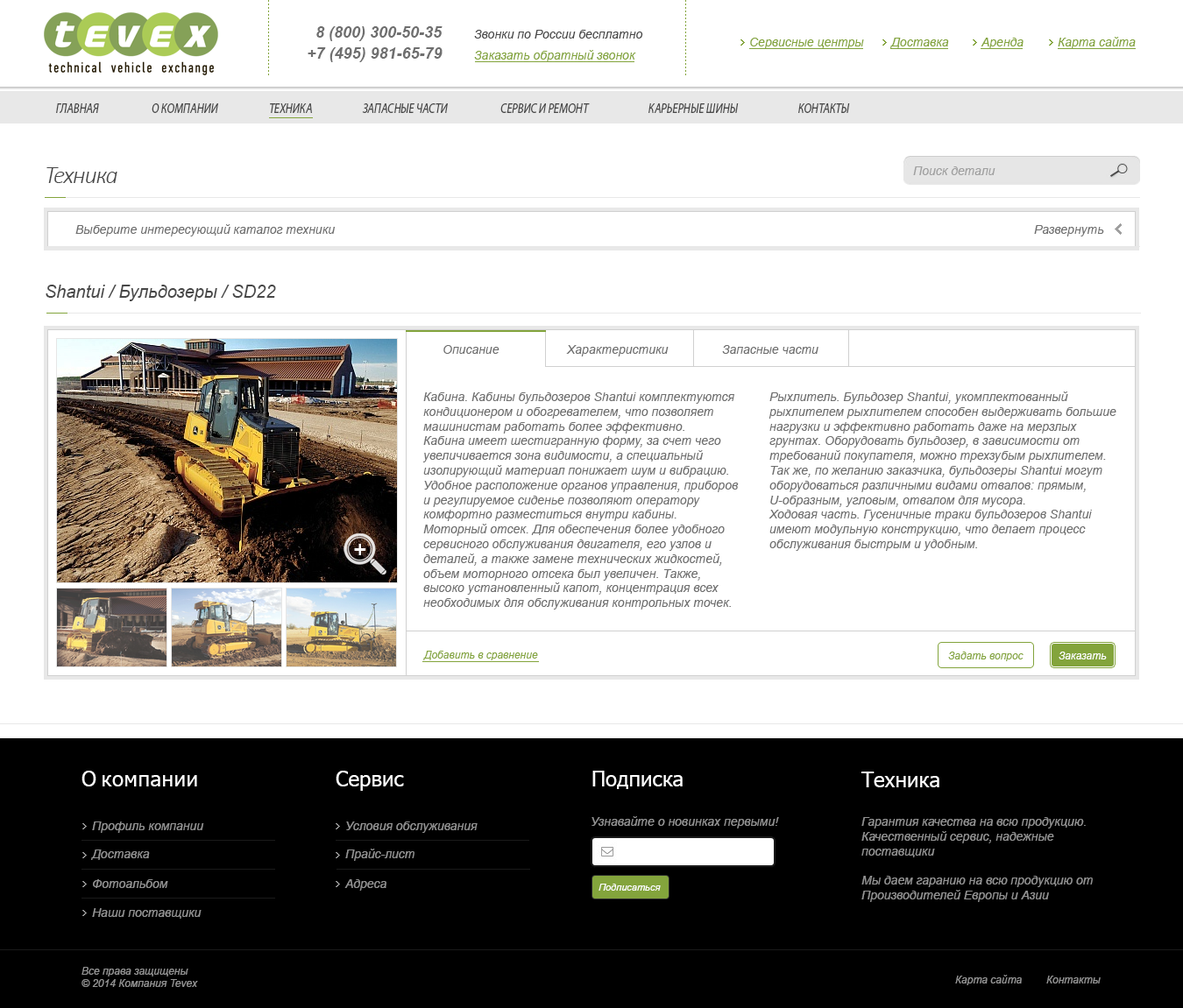
<style>
.page{position:relative;width:1183px;height:1008px;background:#ffffff}
.page>*{position:absolute;margin:0}
.t1{font:15.8px "Arial-BoldItalicMT";color:#6f6f6f}
.t2{font:12.3px "Arial-ItalicMT";color:#484848}
.t3{font:12.3px "Arial-ItalicMT";color:#83a43c}
.t4{font:14.3px "MyriadPro-It";color:#484848;scale:0.79 1}
.t5{font:24.5px "Calibri-LightItalic";letter-spacing:-0.04em;color:#484848}
.t6{font:12.3px "Arial-ItalicMT";color:#a0a0a0}
.t7{font:12.3px "Arial-ItalicMT";color:#6f6f6f}
.t8{font:17.5px "Arial-ItalicMT";color:#484848}
.t9{font:10.5px "Arial-ItalicMT";color:#83a43c}
.t10{font:10.5px "Arial-ItalicMT";color:#ffffff}
.t11{font:21px "Tahoma";letter-spacing:0.02em;color:#ffffff}
.t12{font:21px "Tahoma";color:#ffffff}
.t13{font:12.3px "Arial-ItalicMT";color:#939393}
.t14{font:9.6px "Arial-ItalicMT";color:#ffffff}
.t15{font:10.5px "Arial-ItalicMT";color:#939393}
</style>
<div class="page">
<p class="t1" style="left:316px;top:26px;width:126px;height:15px">8 (800) 300-50-35</p>
<p class="t2" style="left:474px;top:30px;width:169px;height:9px">Звонки по России бесплатно</p>
<p class="t3" style="left:750px;top:38px;width:114px;height:11px">Сервисные центры</p>
<p class="t3" style="left:890px;top:38px;width:59px;height:10px">Доставка</p>
<p class="t3" style="left:980px;top:38px;width:43px;height:11px">Аренда</p>
<p class="t3" style="left:1057px;top:37px;width:78px;height:12px">Карта сайта</p>
<p class="t1" style="left:307px;top:47px;width:135px;height:15px">+7 (495) 981-65-79</p>
<p class="t3" style="left:474px;top:50px;width:162px;height:12px">Заказать обратный звонок</p>
<p class="t4" style="left:56px;top:103px;width:43px;height:10px">ГЛАВНАЯ</p>
<p class="t4" style="left:152px;top:103px;width:66px;height:10px">О КОМПАНИИ</p>
<p class="t4" style="left:270px;top:103px;width:42px;height:10px">ТЕХНИКА</p>
<p class="t4" style="left:362px;top:103px;width:86px;height:10px">ЗАПАСНЫЕ ЧАСТИ</p>
<p class="t4" style="left:500px;top:103px;width:90px;height:10px">СЕРВИС И РЕМОНТ</p>
<p class="t4" style="left:648px;top:103px;width:90px;height:10px">КАРЬЕРНЫЕ ШИНЫ</p>
<p class="t4" style="left:798px;top:103px;width:52px;height:10px">КОНТАКТЫ</p>
<p class="t5" style="left:46px;top:167px;width:71px;height:16px">Техника</p>
<p class="t6" style="left:913px;top:166px;width:82px;height:9px">Поиск детали</p>
<p class="t7" style="left:75px;top:224px;width:261px;height:13px">Выберите интересующий каталог техники</p>
<p class="t7" style="left:1034px;top:225px;width:70px;height:12px">Развернуть</p>
<p class="t8" style="left:46px;top:285px;width:230px;height:16px">Shantui / Бульдозеры / SD22</p>
<p class="t7" style="left:443px;top:345px;width:56px;height:9px">Описание</p>
<p class="t7" style="left:566px;top:345px;width:102px;height:12px">Характеристики</p>
<p class="t7" style="left:722px;top:345px;width:96px;height:9px">Запасные части</p>
<p class="t7" style="left:422px;top:392px;width:316px;height:218px">Кабина. Кабины бульдозеров Shantui комплектуются <br>кондиционером и обогревателем, что позволяет <br>машинистам работать более эффективно. <br>Кабина имеет шестигранную форму, за счет чего <br>увеличивается зона видимости, а специальный <br>изолирующий материал понижает шум и вибрацию. <br>Удобное расположение органов управления, приборов <br>и регулируемое сиденье позволяют оператору <br>комфортно разместиться внутри кабины.<br>Моторный отсек. Для обеспечения более удобного <br>сервисного обслуживания двигателя, его узлов и <br>деталей, а также замене технических жидкостей, <br>объем моторного отсека был увеличен. Также, <br>высоко установленный капот, концентрация всех <br>необходимых для обслуживания контрольных точек.</p>
<p class="t7" style="left:768px;top:392px;width:348px;height:159px">Рыхлитель. Бульдозер Shantui, укомплектованный <br>рыхлителем рыхлителем способен выдерживать большие <br>нагрузки и эффективно работать даже на мерзлых <br>грунтах. Оборудовать бульдозер, в зависимости от <br>требований покупателя, можно трехзубым рыхлителем. <br>Так же, по желанию заказчика, бульдозеры Shantui могут <br>оборудоваться различными видами отвалов: прямым, <br>U-образным, угловым, отвалом для мусора.<br>Ходовая часть. Гусеничные траки бульдозеров Shantui <br>имеют модульную конструкцию, что делает процесс <br>обслуживания быстрым и удобным.</p>
<p class="t9" style="left:423px;top:651px;width:115px;height:10px">Добавить в сравнение</p>
<p class="t9" style="left:948px;top:652px;width:75px;height:9px">Задать вопрос</p>
<p class="t10" style="left:1058px;top:652px;width:48px;height:8px">Заказать</p>
<p class="t11" style="left:81px;top:771px;width:116px;height:16px"><span class="t12">О </span>компании</p>
<p class="t12" style="left:336px;top:771px;width:68px;height:20px">Сервис</p>
<p class="t12" style="left:592px;top:771px;width:90px;height:18px">Подписка</p>
<p class="t12" style="left:861px;top:772px;width:78px;height:16px">Техника</p>
<p class="t13" style="left:92px;top:822px;width:112px;height:11px">Профиль компании</p>
<p class="t13" style="left:346px;top:822px;width:131px;height:11px">Условия обслуживания</p>
<p class="t13" style="left:591px;top:816px;width:188px;height:13px">Узнавайте о новинках первыми!</p>
<p class="t13" style="left:861px;top:817px;width:231px;height:85px">Гарантия качества на всю продукцию.<br>Качественный сервис, надежные <br>поставщики<br><br>Мы даем гаранию на всю продукцию от <br>Производителей Европы и Азии</p>
<p class="t13" style="left:91px;top:850px;width:59px;height:10px">Доставка</p>
<p class="t13" style="left:345px;top:849px;width:69px;height:12px">Прайс-лист</p>
<p class="t13" style="left:93px;top:880px;width:75px;height:8px">Фотоальбом</p>
<p class="t13" style="left:344px;top:880px;width:42px;height:11px">Адреса</p>
<p class="t14" style="left:598px;top:884px;width:63px;height:7px">Подписаться</p>
<p class="t13" style="left:92px;top:908px;width:109px;height:11px">Наши поставщики</p>
<p class="t15" style="left:81px;top:967px;width:117px;height:20px">Все права защищены<br>© 2014 Компания Tevex</p>
<p class="t15" style="left:955px;top:975px;width:66px;height:11px">Карта сайта</p>
<p class="t15" style="left:1046px;top:976px;width:54px;height:8px">Контакты</p>
</div>
